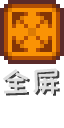
<style>
.page{position:relative;width:64px;height:128px;background:#ffffff}
.page>*{position:absolute;margin:0}
.t1{font:30px "HappyZcool-2016"}
</style>
<div class="page">
<p class="t1" style="left:5px;top:70px;width:55px;height:26px">全屏</p>
</div>
